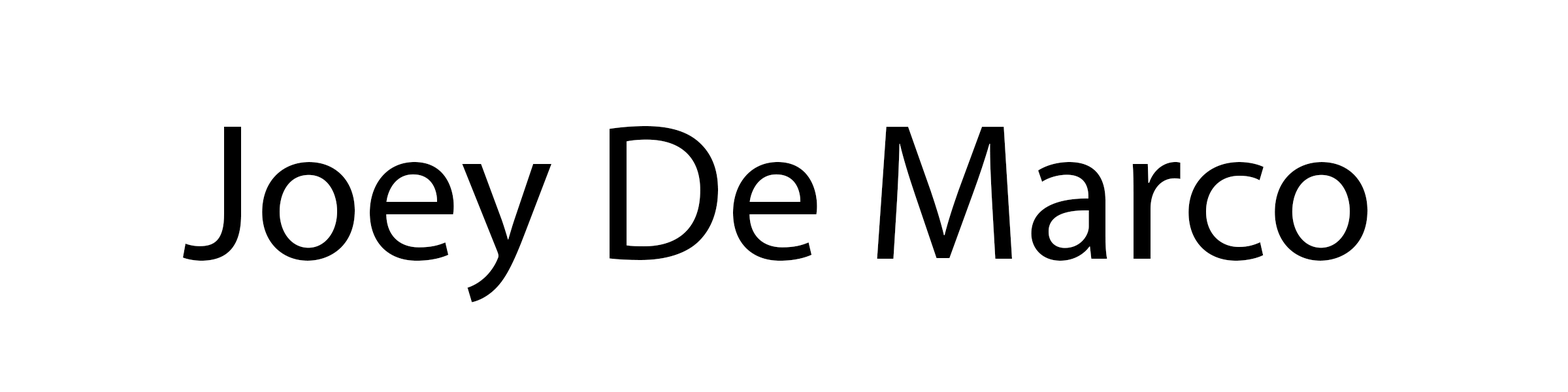
<style>
.page{position:relative;width:1568px;height:392px;background:#ffffff}
.page>*{position:absolute;margin:0}
.t1{font:196px "MyriadPro-Regular";color:#000000}
</style>
<div class="page">
<p class="t1" style="left:183px;top:126px;width:1184px;height:176px">Joey De Marco</p>
</div>
